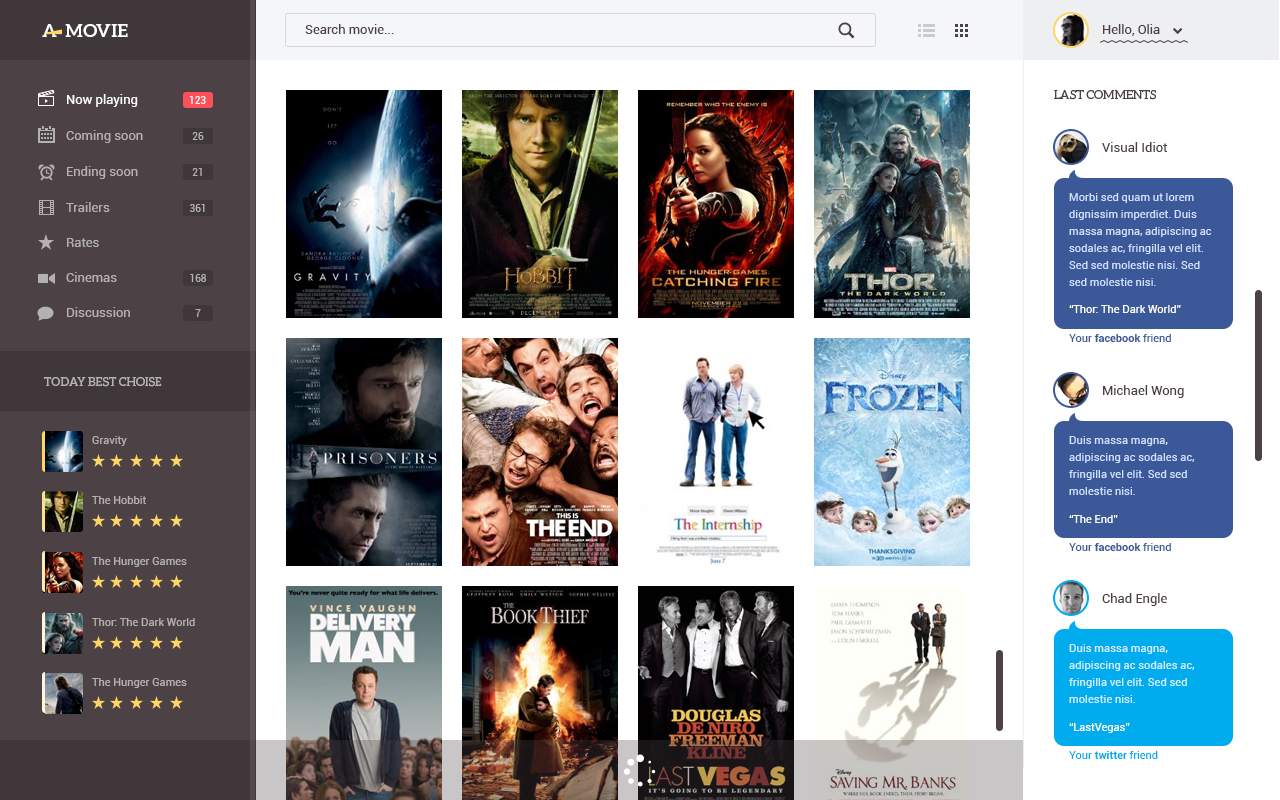
<style>
.page{position:relative;width:1280px;height:800px;background:#ffffff}
.page>*{position:absolute;margin:0}
.t1{font:18px "Aleo-Bold";color:#ffffff;text-transform:uppercase}
.t2{font:13px "Roboto-Regular";color:#4c4145}
.t3{font:13px "Roboto-Regular";color:#ffffff}
.t4{font:10px "Roboto-Regular";color:#ffffff}
.t5{font:12px "Aleo-Regular";color:#4c4145;text-transform:uppercase}
.t6{font:13px "Roboto-Regular";color:#b4b1b2}
.t7{font:10px "Roboto-Regular";color:#b4b1b2}
.t8{font:11px/17px "Roboto-Regular";color:#d0dfff}
.t9{font:11px "Roboto-Regular";color:#ffffff}
.t10{font:11px "Roboto-Bold";color:#3b5998}
.t11{font:11px "Roboto-Regular";color:#3b5998}
.t12{font:12px "Aleo-Regular";color:#b4b1b2;text-transform:uppercase}
.t13{font:11px "Roboto-Regular";color:#b4b1b2}
.t14{font:11px/17px "Roboto-Regular";color:#d0f0ff}
.t15{font:11px "Roboto-Bold";color:#00acee}
.t16{font:11px "Roboto-Regular";color:#00acee}
</style>
<div class="page">
<p class="t1" style="left:42px;top:24px;width:15px;height:13px">A</p>
<p class="t1" style="left:65px;top:24px;width:63px;height:13px">movie</p>
<p class="t2" style="left:305px;top:24px;width:89px;height:10px">Search movie...</p>
<p class="t2" style="left:1103px;top:24px;width:57px;height:12px">Hello, Olia</p>
<p class="t3" style="left:67px;top:94px;width:71px;height:13px">Now playing</p>
<p class="t4" style="left:189px;top:96px;width:17px;height:8px">123</p>
<p class="t5" style="left:1054px;top:90px;width:102px;height:10px">Last comments</p>
<p class="t6" style="left:66px;top:130px;width:77px;height:13px">Coming soon</p>
<p class="t7" style="left:192px;top:132px;width:12px;height:8px">26</p>
<p class="t2" style="left:1102px;top:142px;width:66px;height:10px">Visual Idiot</p>
<p class="t6" style="left:67px;top:166px;width:71px;height:13px">Ending soon</p>
<p class="t7" style="left:192px;top:168px;width:10px;height:8px">21</p>
<p class="t8" style="left:1069px;top:193px;width:143px;height:93px">Morbi sed quam ut lorem dignissim imperdiet. Duis massa magna, adipiscing ac sodales ac, fringilla vel elit. Sed sed molestie nisi. Sed sed molestie nisi.</p>
<p class="t6" style="left:66px;top:202px;width:44px;height:10px">Trailers</p>
<p class="t7" style="left:190px;top:204px;width:15px;height:8px">361</p>
<p class="t6" style="left:67px;top:238px;width:32px;height:9px">Rates</p>
<p class="t6" style="left:66px;top:272px;width:51px;height:10px">Cinemas</p>
<p class="t7" style="left:190px;top:274px;width:16px;height:8px">168</p>
<p class="t9" style="left:1069px;top:305px;width:112px;height:8px">“Thor: The Dark World”</p>
<p class="t6" style="left:67px;top:307px;width:63px;height:10px">Discussion</p>
<p class="t7" style="left:195px;top:309px;width:6px;height:8px">7</p>
<p class="t10" style="left:1069px;top:334px;width:102px;height:8px"><span class="t11">Your </span>facebook <span class="t11">friend</span></p>
<p class="t12" style="left:44px;top:377px;width:118px;height:10px">Today best choise</p>
<p class="t2" style="left:1103px;top:385px;width:81px;height:13px">Michael Wong</p>
<p class="t13" style="left:92px;top:436px;width:35px;height:10px">Gravity</p>
<p class="t8" style="left:1069px;top:436px;width:126px;height:59px">Duis massa magna, adipiscing ac sodales ac, fringilla vel elit. Sed sed molestie nisi.</p>
<p class="t13" style="left:92px;top:496px;width:54px;height:8px">The Hobbit</p>
<p class="t9" style="left:1069px;top:515px;width:49px;height:8px">“The End”</p>
<p class="t10" style="left:1069px;top:543px;width:102px;height:8px"><span class="t11">Your </span>facebook <span class="t11">friend</span></p>
<p class="t13" style="left:92px;top:557px;width:95px;height:10px">The Hunger Games</p>
<p class="t2" style="left:1102px;top:593px;width:65px;height:13px">Chad Engle</p>
<p class="t13" style="left:92px;top:618px;width:103px;height:8px">Thor: The Dark World</p>
<p class="t14" style="left:1069px;top:644px;width:126px;height:59px">Duis massa magna, adipiscing ac sodales ac, fringilla vel elit. Sed sed molestie nisi.</p>
<p class="t13" style="left:92px;top:678px;width:95px;height:10px">The Hunger Games</p>
<p class="t9" style="left:1069px;top:723px;width:61px;height:10px">“LastVegas”</p>
<p class="t15" style="left:1069px;top:751px;width:89px;height:8px"><span class="t16">Your </span>twitter<span class="t16"> friend</span></p>
</div>
